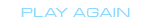
<style>
.page{position:relative;width:150px;height:25px;background:#ffffff}
.page>*{position:absolute;margin:0}
.t1{font:14px "MicrogrammaD-MediExte";letter-spacing:0.075em;color:#8dd9ff;text-transform:uppercase}
</style>
<div class="page">
<p class="t1" style="left:21px;top:8px;width:109px;height:9px">Play AGAIN</p>
</div>
